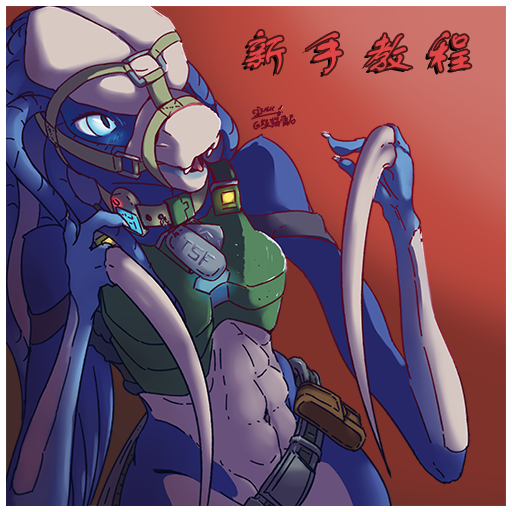
<style>
.page{position:relative;width:512px;height:512px}
.page>*{position:absolute;margin:0}
.t1{font:50px "FZSTK--GBK1-0";letter-spacing:0.22em;color:#e24545}
</style>
<div class="page">
<p class="t1" style="left:245px;top:31px;width:226px;height:43px">新手教程</p>
</div>
